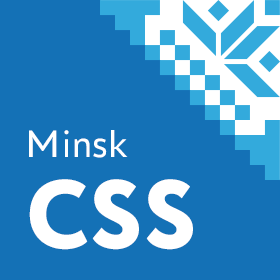
<style>
.page{position:relative;width:280px;height:280px;background:#1471b6}
.page>*{position:absolute;margin:0}
.t1{font:40px "PTAstraSans-Regular";color:#ffffff}
.t2{font:96.5px "Circe-ExtraBold";color:#ffffff}
</style>
<div class="page">
<p class="t1" style="left:29px;top:130px;width:99px;height:28px">Minsk</p>
<p class="t2" style="left:29px;top:179px;width:164px;height:71px">CSS</p>
</div>
